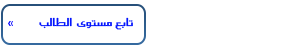
<style>
.page{position:relative;width:300px;height:50px;background:#ffffff}
.page>*{position:absolute;margin:0}
.t1{font:13px "SC_KHALID";color:#0214fd;scale:1.12 1}
</style>
<div class="page">
<p class="t1" style="left:39px;top:17px;width:94px;height:13px">تابع  مستوى   الطالب</p>
</div>
